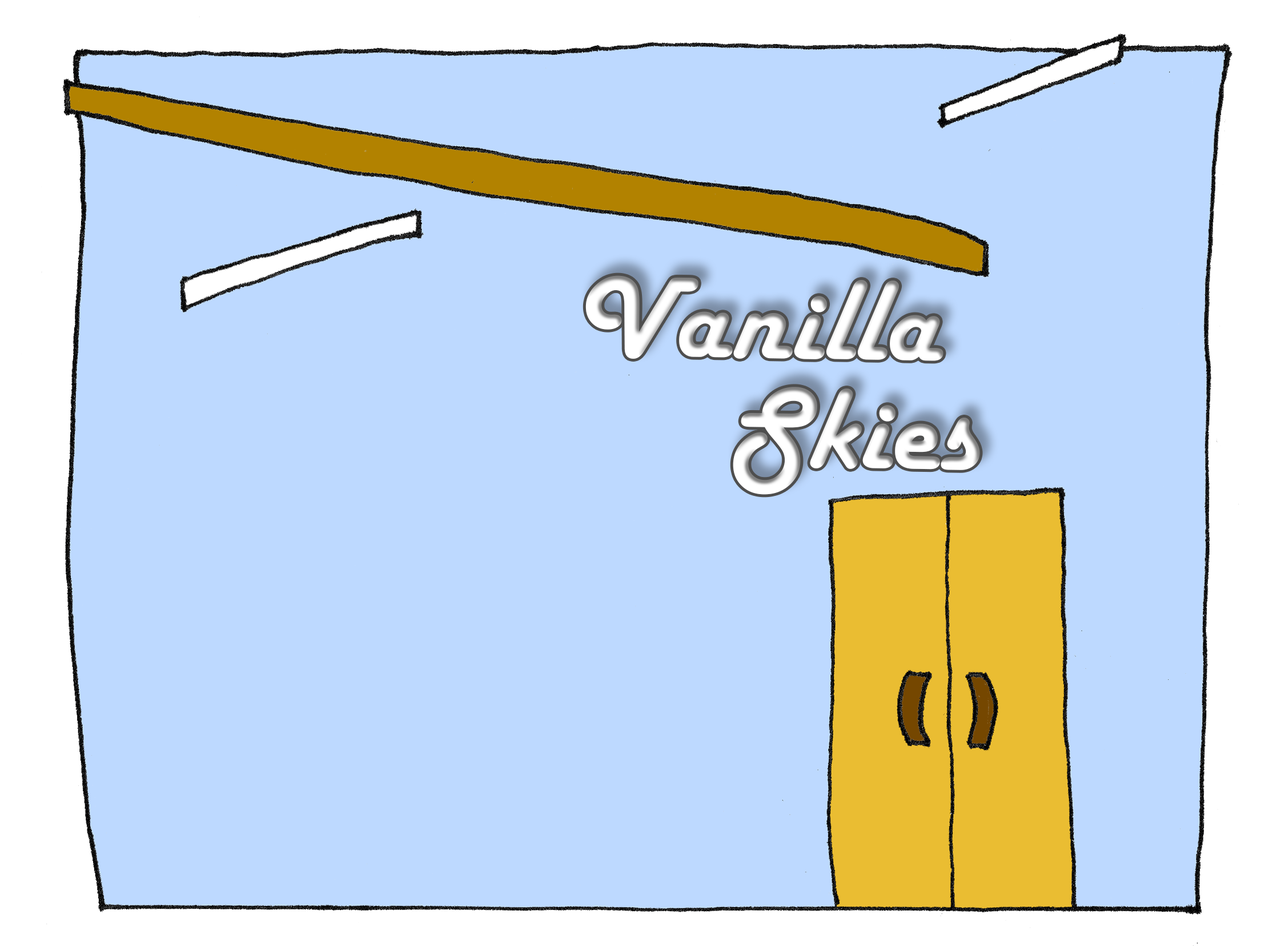
<style>
.page{position:relative;width:1261px;height:946px;background:#bdd9ff}
.page>*{position:absolute;margin:0}
.t1{font:119px "HarlowSolid";color:#ffffff}
</style>
<div class="page">
<p class="t1" style="left:585px;top:275px;width:358px;height:86px;rotate:1deg">Vanilla</p>
<p class="t1" style="left:733px;top:387px;width:247px;height:108px;rotate:1deg">Skies</p>
</div>
